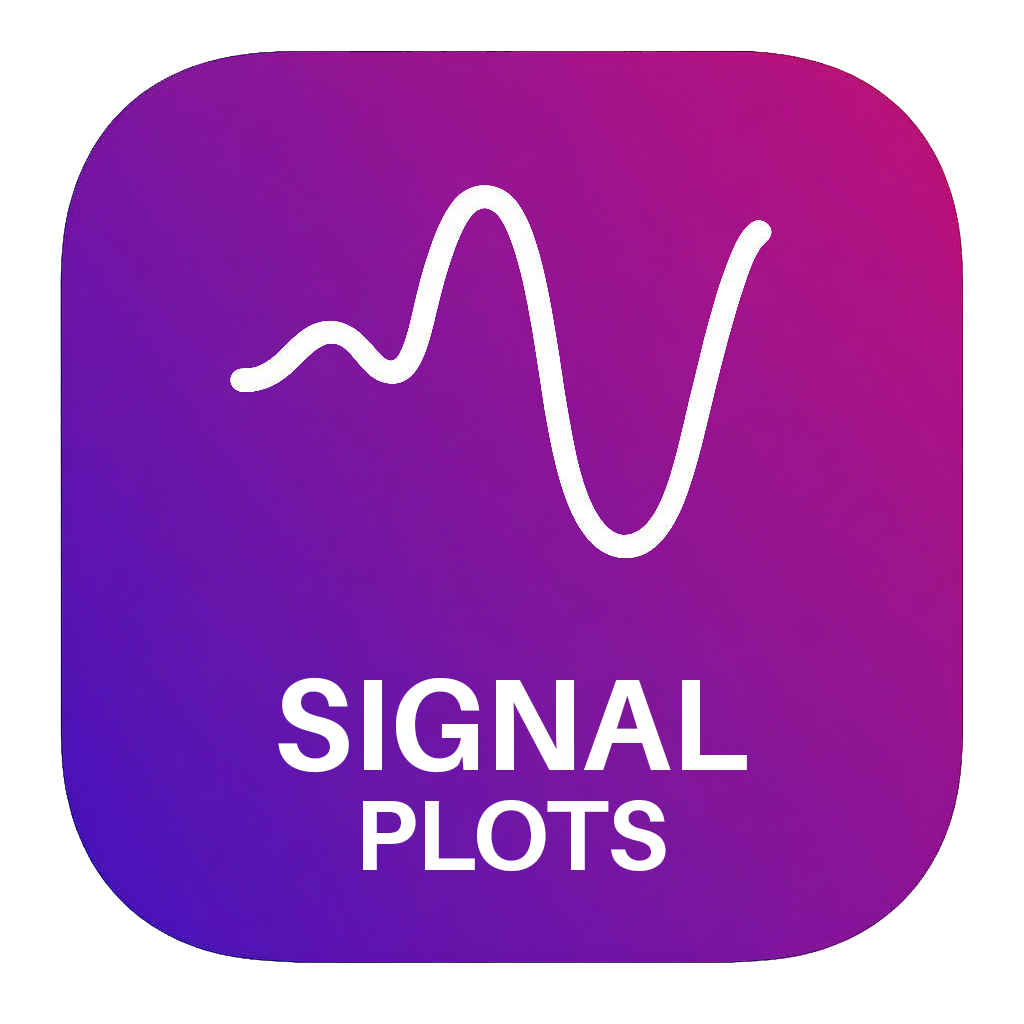
<style>
.page{position:relative;width:1024px;height:1024px;background:#ffffff}
.page>*{position:absolute;margin:0}
.t1{font:130px/100px "Aileron-Bold";letter-spacing:-0.005em;color:#ffffff}
.t2{font:100px/100px "Aileron-Bold";letter-spacing:-0.005em;color:#ffffff}
</style>
<div class="page">
<p class="t1" style="left:278px;top:677px;width:469px;height:194px;text-align:center">SIGNAL<br><span class="t2">PLOTS</span></p>
</div>
